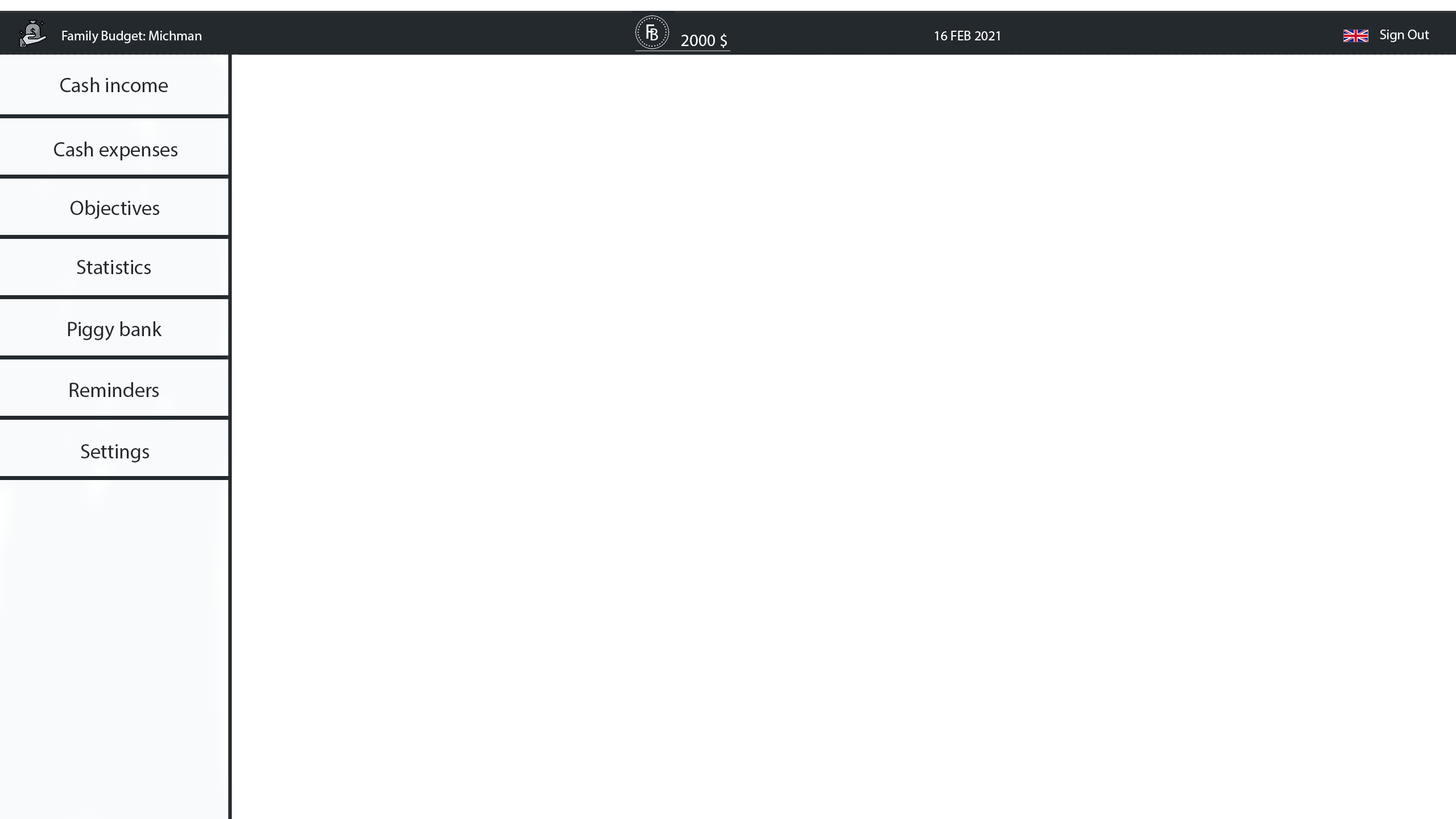
<style>
.page{position:relative;width:1456px;height:819px;background:#ffffff}
.page>*{position:absolute;margin:0}
.t1{font:13.6px "MyriadPro-Regular";color:#f8fafb}
.t2{font:13.6px "MyriadPro-Regular";color:#ffffff}
.t3{font:17.1px "MyriadPro-Regular";color:#ffffff}
.t4{font:20.5px "MyriadPro-Regular";color:#24292e}
</style>
<div class="page">
<p class="t1" style="left:1380px;top:30px;width:49px;height:12px">Sign Out</p>
<p class="t2" style="left:62px;top:31px;width:139px;height:12px">Family Budget: Michman</p>
<p class="t3" style="left:681px;top:34px;width:46px;height:14px">2000 $</p>
<p class="t2" style="left:935px;top:31px;width:65px;height:9px">16 FEB 2021</p>
<p class="t4" style="left:60px;top:77px;width:108px;height:15px">Cash income</p>
<p class="t4" style="left:54px;top:142px;width:123px;height:18px">Cash expenses</p>
<p class="t4" style="left:71px;top:200px;width:88px;height:19px">Objectives</p>
<p class="t4" style="left:77px;top:260px;width:74px;height:14px">Statistics</p>
<p class="t4" style="left:68px;top:321px;width:94px;height:20px">Piggy bank</p>
<p class="t4" style="left:69px;top:382px;width:90px;height:15px">Reminders</p>
<p class="t4" style="left:81px;top:444px;width:68px;height:18px">Settings</p>
</div>
